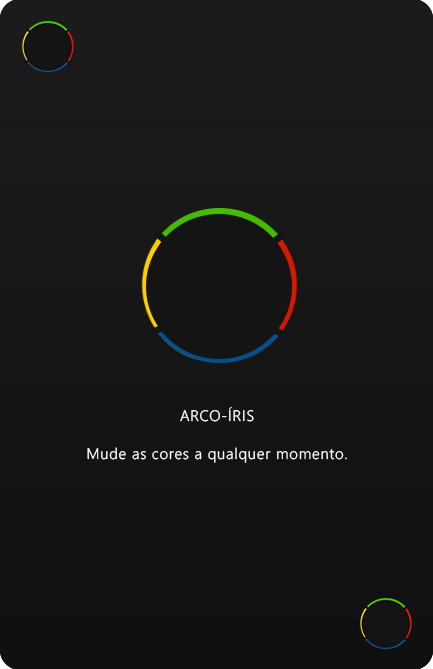
<style>
.page{position:relative;width:433px;height:669px}
.page>*{position:absolute;margin:0}
.t1{font:15.2px "NirmalaUI-Semilight";letter-spacing:0.05em;color:#ffffff}
</style>
<div class="page">
<p class="t1" style="left:180px;top:406px;width:74px;height:16px">ARCO-ÍRIS</p>
<p class="t1" style="left:87px;top:447px;width:260px;height:16px">Mude as cores a qualquer momento.</p>
</div>
